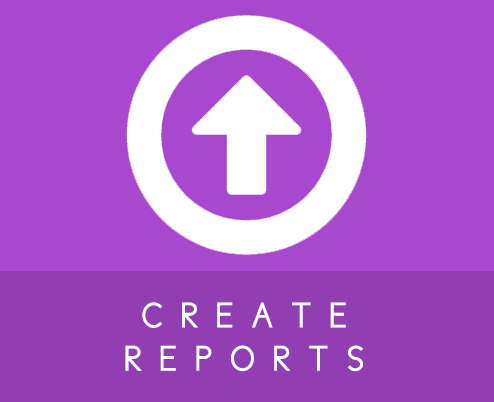
<style>
.page{position:relative;width:494px;height:402px;background:#a748ce}
.page>*{position:absolute;margin:0}
.t1{font:36px "CicleGordita";letter-spacing:0.5em;color:#ffffff;text-transform:uppercase}
</style>
<div class="page">
<p class="t1" style="left:125px;top:302px;width:239px;height:70px;text-align:center">CREATE<br>Reports</p>
</div>
